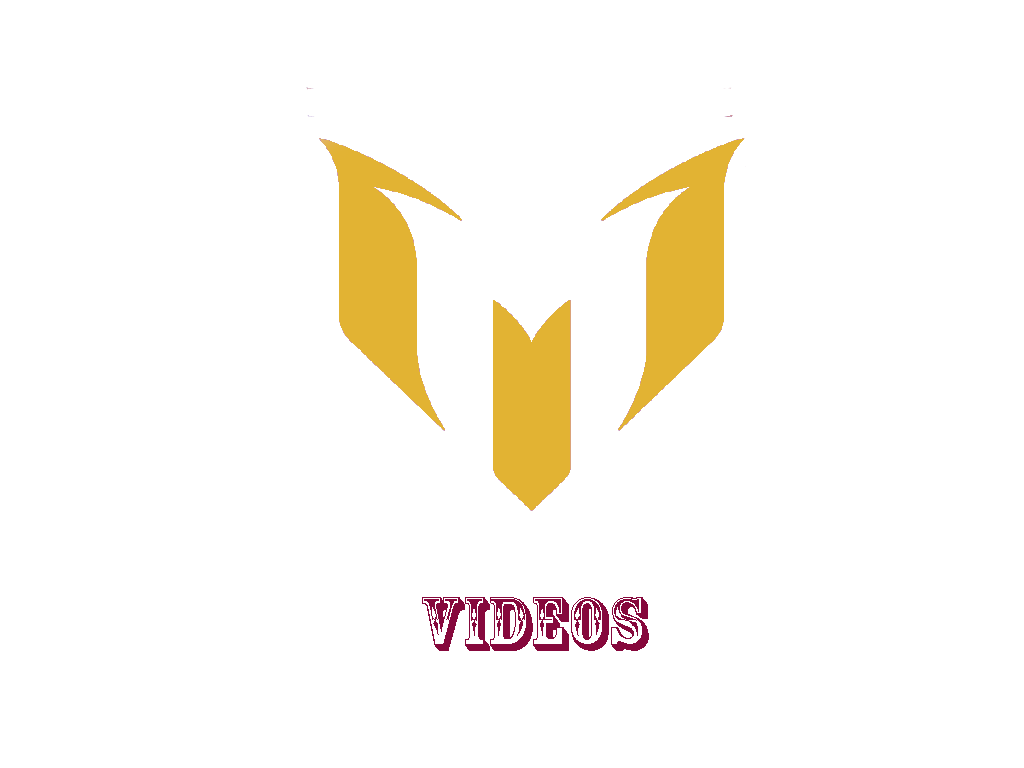
<style>
.page{position:relative;width:1024px;height:768px;background:#ffffff}
.page>*{position:absolute;margin:0}
.t1{font:72px "RosewoodStd-Regular";color:#86083c}
</style>
<div class="page">
<p class="t1" style="left:422px;top:597px;width:227px;height:54px">VIDEOS</p>
</div>
